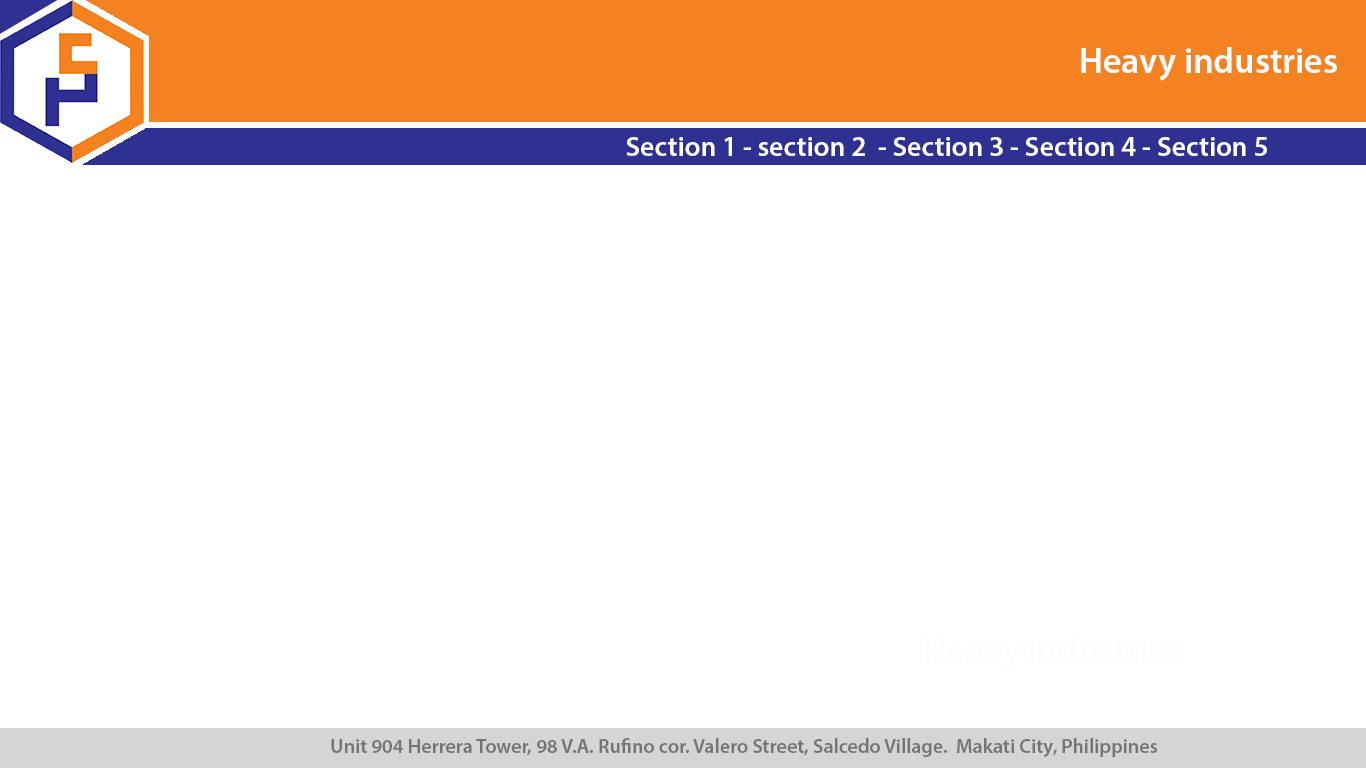
<style>
.page{position:relative;width:1366px;height:768px;background:#ffffff}
.page>*{position:absolute;margin:0}
.t1{font:36px "MyriadPro-Semibold";color:#fbfcfe}
.t2{font:28px "MyriadPro-Semibold";color:#ffffff}
.t3{font:20px "MyriadPro-Semibold";color:#757474}
</style>
<div class="page">
<p class="t1" style="left:1081px;top:47px;width:256px;height:34px">Heavy industries</p>
<p class="t2" style="left:626px;top:137px;width:641px;height:19px">Section 1 - section 2  - Section 3 - Section 4 - Section 5</p>
<p class="t3" style="left:331px;top:738px;width:826px;height:20px">Unit 904 Herrera Tower, 98 V.A. Rufino cor. Valero Street, Salcedo Village.  Makati City, Philippines</p>
</div>
